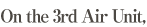
<style>
.page{position:relative;width:147px;height:27px;background:#ffffff}
.page>*{position:absolute;margin:0}
.t1{font:18px "RyuminPro-ExBold";letter-spacing:-0.08em;color:#4c4843}
</style>
<div class="page">
<p class="t1" style="left:1px;top:9px;width:145px;height:16px">On the 3rd Air Unit,</p>
</div>
